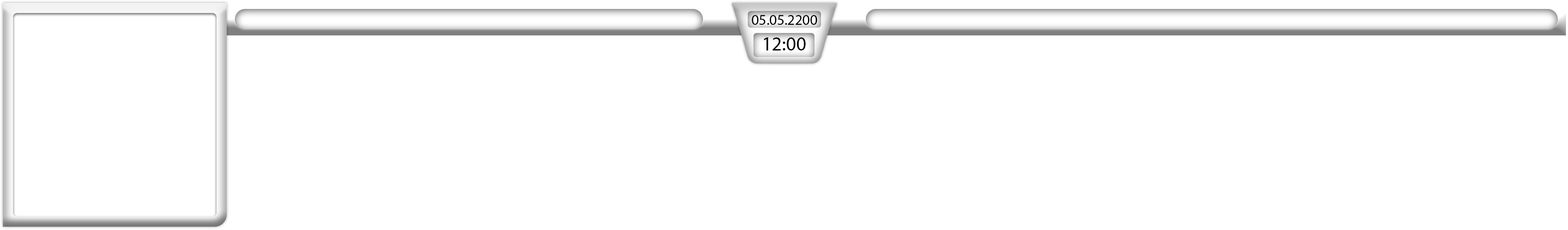
<style>
.page{position:relative;width:1568px;height:230px;background:#ffffff}
.page>*{position:absolute;margin:0}
.t1{font:14.7px "MyriadPro-Regular";color:#000000}
.t2{font:19.5px "MyriadPro-Regular";color:#000000}
</style>
<div class="page">
<p class="t1" style="left:752px;top:15px;width:65px;height:10px">05.05.2200</p>
<p class="t2" style="left:764px;top:37px;width:42px;height:13px">12:00</p>
</div>
